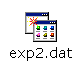
<style>
.page{position:relative;width:80px;height:80px;background:#ffffff}
.page>*{position:absolute;margin:0}
.t1{font:14px "MSReferenceSansSerif";color:#000000}
</style>
<div class="page">
<p class="t1" style="left:10px;top:47px;width:62px;height:14px">exp2.dat</p>
</div>
